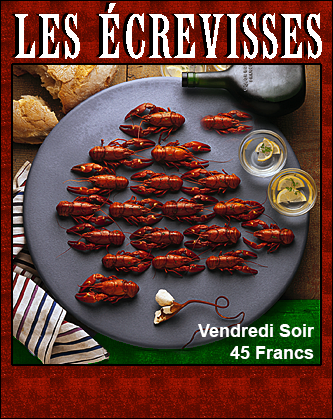
<style>
.page{position:relative;width:333px;height:419px}
.page>*{position:absolute;margin:0}
.t1{font:18px "Arial-BoldMT";color:#ffffff}
</style>
<div class="page">
<p class="t1" style="left:198px;top:324px;width:116px;height:35px;text-align:right">Vendredi Soir<br>45 Francs</p>
</div>
